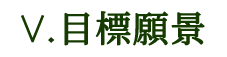
<style>
.page{position:relative;width:227px;height:57px;background:#ffffff}
.page>*{position:absolute;margin:0}
.t1{font:36px "SourceHanSerifTW-Regular";letter-spacing:0.01em;color:#153b01;font-weight:bold}
.t2{font:36px "AMGDT_IV50";letter-spacing:0.01em;color:#153b01}
</style>
<div class="page">
<p class="t1" style="left:21px;top:11px;width:184px;height:35px"><span class="t2">V.</span>目標願景</p>
</div>
